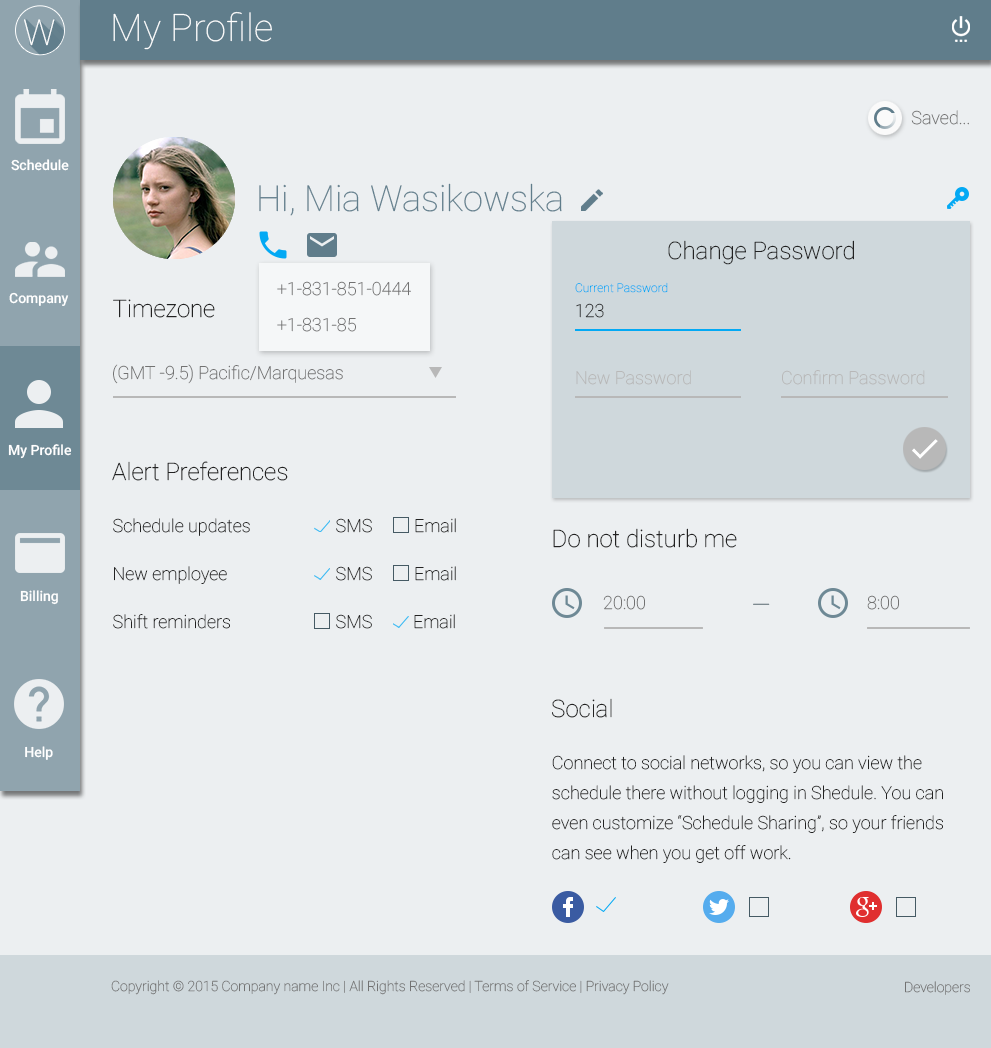
<style>
.page{position:relative;width:991px;height:1048px;background:#eceff1}
.page>*{position:absolute;margin:0}
.t1{font:38px "Roboto-Thin";color:#ffffff}
.t2{font:35.7px "Roboto-Thin";color:#ffffff}
.t3{font:18px "Roboto-Thin";color:#727272}
.t4{font:14px "Roboto-Medium";color:#ffffff}
.t5{font:36px "Roboto-Thin";color:#607d8b}
.t6{font:24px "Roboto-Thin";color:#222222}
.t7{font:12px "Roboto-Thin";color:#03a9f4}
.t8{font:18px "Roboto-Thin";color:#222222}
.t9{font:18px "Roboto-Thin";color:#b8b8b8}
.t10{font:18px/24px "Roboto-Thin";color:#222222}
.t11{font:24px "Roboto-Thin"}
.t12{font:18px/30px "Roboto-Thin";color:#222222}
.t13{font:14px "Roboto-Thin";color:#727272}
</style>
<div class="page">
<p class="t1" style="left:113px;top:11px;width:159px;height:39px">My Profile</p>
<p class="t2" style="left:24px;top:19px;width:31px;height:27px">W</p>
<p class="t3" style="left:911px;top:110px;width:58px;height:15px">Saved...</p>
<p class="t4" style="left:11px;top:159px;width:58px;height:12px">Schedule</p>
<p class="t5" style="left:259px;top:183px;width:303px;height:33px">Hi, Mia Wasikowska</p>
<p class="t6" style="left:668px;top:240px;width:186px;height:25px">Change Password</p>
<p class="t3" style="left:277px;top:281px;width:134px;height:15px">+1-831-851-0444</p>
<p class="t4" style="left:9px;top:292px;width:60px;height:14px">Company</p>
<p class="t7" style="left:575px;top:282px;width:93px;height:11px">Current Password</p>
<p class="t6" style="left:113px;top:299px;width:102px;height:19px">Timezone</p>
<p class="t8" style="left:576px;top:303px;width:28px;height:15px">123</p>
<p class="t3" style="left:277px;top:317px;width:79px;height:15px">+1-831-85</p>
<p class="t3" style="left:113px;top:364px;width:230px;height:20px">(GMT -9.5) Pacific/Marquesas</p>
<p class="t9" style="left:576px;top:370px;width:115px;height:15px">New Password</p>
<p class="t9" style="left:782px;top:370px;width:143px;height:15px">Confirm Password</p>
<p class="t4" style="left:8px;top:444px;width:64px;height:15px">My Profile</p>
<p class="t6" style="left:112px;top:461px;width:176px;height:20px">Alert Preferences</p>
<p class="t10" style="left:113px;top:518px;width:137px;height:111px">Schedule updates<br><br>New employee<br><br>Shift reminders</p>
<p class="t8" style="left:336px;top:518px;width:36px;height:15px">SMS</p>
<p class="t8" style="left:415px;top:518px;width:41px;height:15px">Email</p>
<p class="t6" style="left:553px;top:528px;width:184px;height:20px">Do not disturb me</p>
<p class="t8" style="left:336px;top:566px;width:36px;height:15px">SMS</p>
<p class="t8" style="left:415px;top:566px;width:41px;height:15px">Email</p>
<p class="t4" style="left:20px;top:590px;width:38px;height:15px">Billing</p>
<p class="t3" style="left:603px;top:595px;width:42px;height:15px">20:00</p>
<p class="t11" style="left:753px;top:603px;width:17px;height:2px">—</p>
<p class="t3" style="left:867px;top:595px;width:32px;height:15px">8:00</p>
<p class="t8" style="left:336px;top:614px;width:36px;height:15px">SMS</p>
<p class="t8" style="left:414px;top:614px;width:41px;height:15px">Email</p>
<p class="t6" style="left:552px;top:698px;width:60px;height:20px">Social</p>
<p class="t4" style="left:25px;top:746px;width:28px;height:14px">Help</p>
<p class="t12" style="left:552px;top:755px;width:391px;height:108px">Connect to social networks, so you can view the schedule there without logging in Shedule. You can even customize “Schedule Sharing”, so your friends can see when you get off work.</p>
<p class="t13" style="left:111px;top:980px;width:558px;height:15px">Copyright © 2015 Company name Inc | All Rights Reserved | Terms of Service | Privacy Policy</p>
<p class="t13" style="left:905px;top:981px;width:65px;height:14px">Developers</p>
</div>
